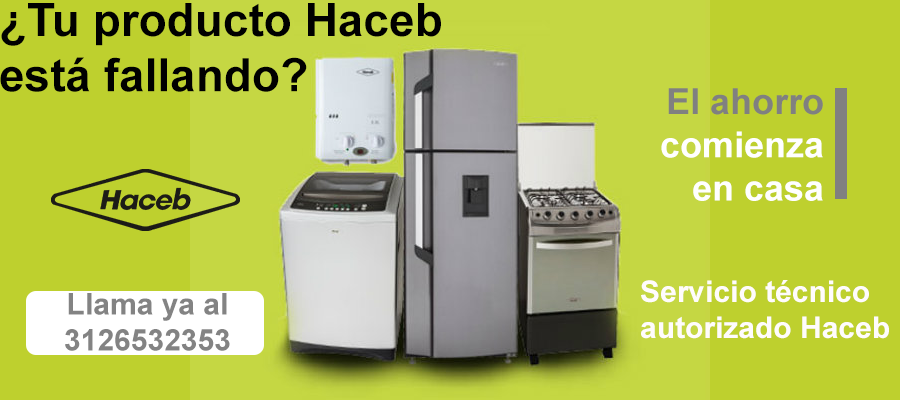
<style>
.page{position:relative;width:900px;height:400px;background:#bed02e}
.page>*{position:absolute;margin:0}
.t1{font:46px "Arial-BoldMT";color:#000000}
.t2{font:36px "Arial-BoldMT";color:#ffffff}
.t3{font:36px "Arial-BoldMT";color:#808080}
.t4{font:30px "Arial-BoldMT";color:#fffcfc}
.t5{font:30px "Arial-BoldMT";color:#838383}
</style>
<div class="page">
<p class="t1" style="left:0px;top:3px;width:441px;height:89px">¿Tu producto Haceb<br>está fallando?</p>
<p class="t2" style="left:661px;top:88px;width:162px;height:113px;text-align:right"><span class="t3">El ahorro<br></span>comienza<br>en casa</p>
<p class="t4" style="left:641px;top:280px;width:248px;height:59px">Servicio técnico<br>autorizado Haceb</p>
<p class="t5" style="left:65px;top:293px;width:165px;height:58px;text-align:center">Llama ya al<br>3126532353</p>
</div>
